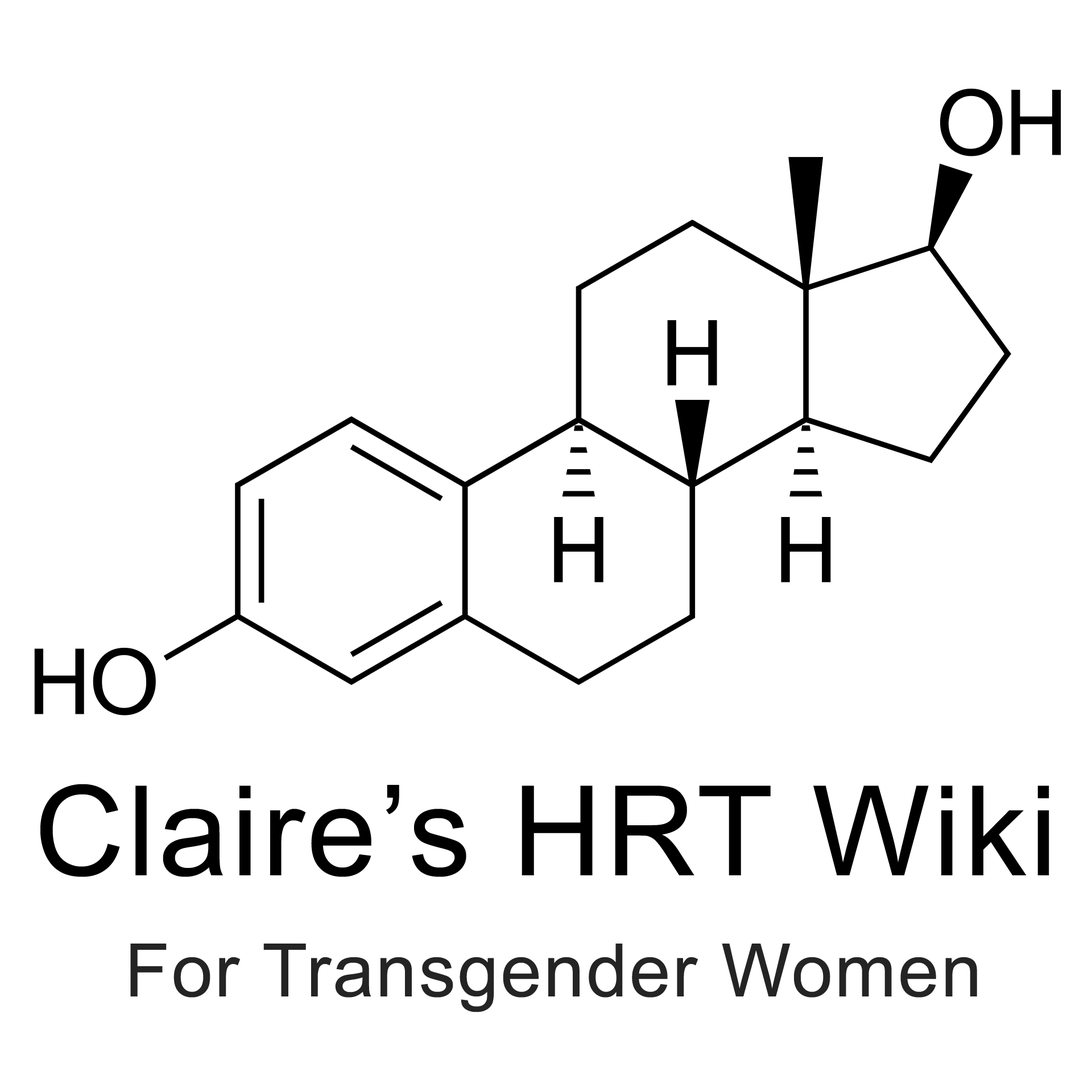
<style>
.page{position:relative;width:1092px;height:1092px;background:#ffffff}
.page>*{position:absolute;margin:0}
.t1{font:125.1px "ArialMT";letter-spacing:0.025em;color:#000000}
.t2{font:73.9px "ArialMT";letter-spacing:0.025em;color:#242424}
</style>
<div class="page">
<p class="t1" style="left:40px;top:784px;width:1009px;height:93px">Claire’s HRT Wiki</p>
<p class="t2" style="left:130px;top:944px;width:847px;height:68px">For Transgender Women</p>
</div>
